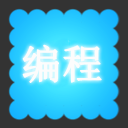
<style>
.page{position:relative;width:128px;height:128px;background:#333333}
.page>*{position:absolute;margin:0}
.t1{font:40px "NSimSun";color:#fcfcfc;font-weight:bold}
</style>
<div class="page">
<p class="t1" style="left:22px;top:44px;width:80px;height:39px">编程</p>
</div>
